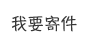
<style>
.page{position:relative;width:90px;height:45px;background:#ffffff}
.page>*{position:absolute;margin:0}
.t1{font:16.7px "HannotateSC-W5";color:#383838}
</style>
<div class="page">
<p class="t1" style="left:11px;top:15px;width:66px;height:17px">我要寄件</p>
</div>
